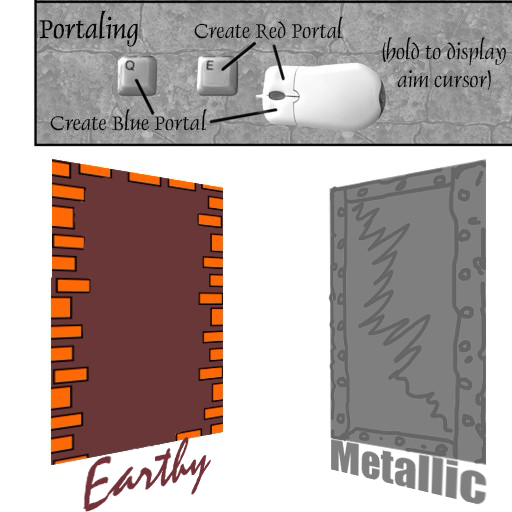
<style>
.page{position:relative;width:512px;height:512px;background:#ffffff}
.page>*{position:absolute;margin:0}
.t1{font:50.5px "Dauphin-Normal";color:#080808}
.t2{font:39px "Dauphin-Normal";color:#080808}
.t3{font:39.3px/28px "Dauphin-Normal";color:#080808}
.t4{font:38.2px "Dauphin-Normal";color:#080808;scale:1.03 1}
.t5{font:38.2px "Dauphin-Normal";letter-spacing:0.04em;color:#080808;scale:1.03 1}
</style>
<div class="page">
<p class="t1" style="left:39px;top:10px;width:99px;height:37px">Portaling</p>
<p class="t2" style="left:194px;top:16px;width:149px;height:24px">Create Red Portal</p>
<p class="t3" style="left:382px;top:37px;width:125px;height:53px">(hold to display<br>   aim cursor)</p>
<p class="t4" style="left:50px;top:109px;width:157px;height:22px">Create Blue Port<span class="t5">a</span>l</p>
</div>
